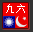
<style>
.page{position:relative;width:33px;height:32px;background:#f20000}
.page>*{position:absolute;margin:0}
.t1{font:10.4px "SimSun";color:#ffffff}
</style>
<div class="page">
<p class="t1" style="left:6px;top:4px;width:19px;height:9px">九六</p>
</div>
